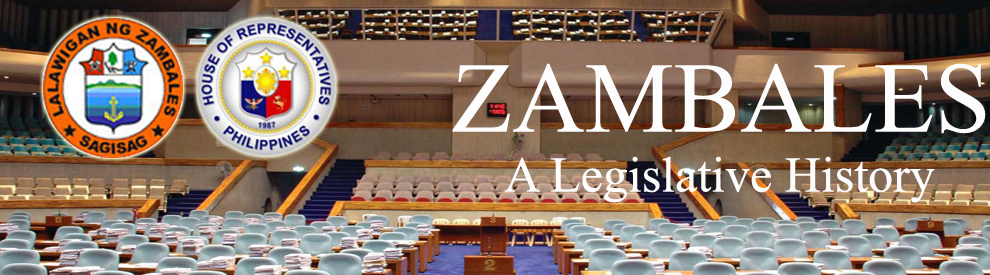
<style>
.page{position:relative;width:990px;height:275px}
.page>*{position:absolute;margin:0}
.t1{font:50px "TimesNewRomanPSMT";color:#fdfcfc}
.t2{font:100px "TimesNewRomanPSMT";color:#fdfdfd}
</style>
<div class="page">
<p class="t1" style="left:452px;top:63px;width:534px;height:140px;text-align:center"><span class="t2">ZAMBALES<br></span>A Legislative History</p>
</div>
